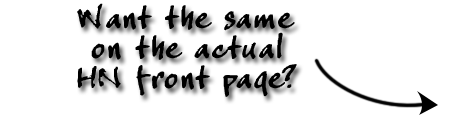
<style>
.page{position:relative;width:450px;height:120px;background:#ffffff}
.page>*{position:absolute;margin:0}
.t1{font:44px/30px "CrappyJoe";color:#000000}
</style>
<div class="page">
<p class="t1" style="left:77px;top:3px;width:220px;height:94px">Want the same<br> on the actual<br>HN front page?</p>
</div>
